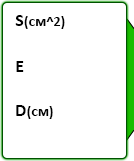
<style>
.page{position:relative;width:134px;height:161px;background:#ffffff}
.page>*{position:absolute;margin:0}
.t1{font:14px "Calibri-Bold";letter-spacing:0.01em;color:#000000;font-variant:small-caps}
.t2{font:18px "Calibri-Bold";letter-spacing:0.01em;color:#000000;font-variant:small-caps}
</style>
<div class="page">
<p class="t1" style="left:15px;top:15px;width:50px;height:14px"><span class="t2">S</span>(см^2)</p>
<p class="t2" style="left:16px;top:61px;width:8px;height:11px">E</p>
<p class="t1" style="left:16px;top:105px;width:37px;height:14px"><span class="t2">D</span>(см)</p>
</div>
